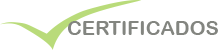
<style>
.page{position:relative;width:220px;height:50px;background:#ffffff}
.page>*{position:absolute;margin:0}
.t1{font:20px "ArialRoundedMTBold";color:#838580}
</style>
<div class="page">
<p class="t1" style="left:68px;top:21px;width:150px;height:14px">CERTIFICADOS</p>
</div>
